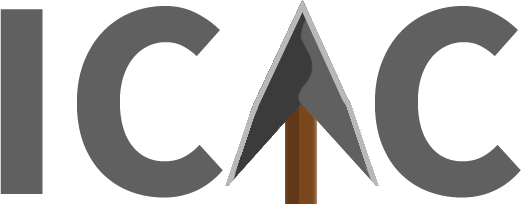
<style>
.page{position:relative;width:522px;height:204px;background:#ffffff}
.page>*{position:absolute;margin:0}
.t1{font:282.7px "SourceSansPro-Bold";color:#606060}
</style>
<div class="page">
<p class="t1" style="left:0px;top:6px;width:223px;height:192px">IC</p>
<p class="t1" style="left:375px;top:6px;width:146px;height:192px">C</p>
</div>
